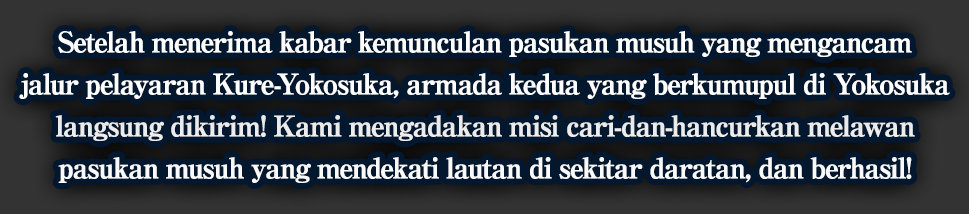
<style>
.page{position:relative;width:969px;height:214px;background:#03172f}
.page>*{position:absolute;margin:0}
.t1{font:28px/42px "RyuminPro-ExBold";letter-spacing:-0.08em;color:#ffffff;font-weight:bold}
</style>
<div class="page">
<p class="t1" style="left:19px;top:31px;width:931px;height:152px;text-align:center">Setelah menerima kabar kemunculan pasukan musuh yang mengancam<br> jalur pelayaran Kure-Yokosuka, armada kedua yang berkumupul di Yokosuka <br>langsung dikirim! Kami mengadakan misi cari-dan-hancurkan melawan<br>pasukan musuh yang mendekati lautan di sekitar daratan, dan berhasil!</p>
</div>
